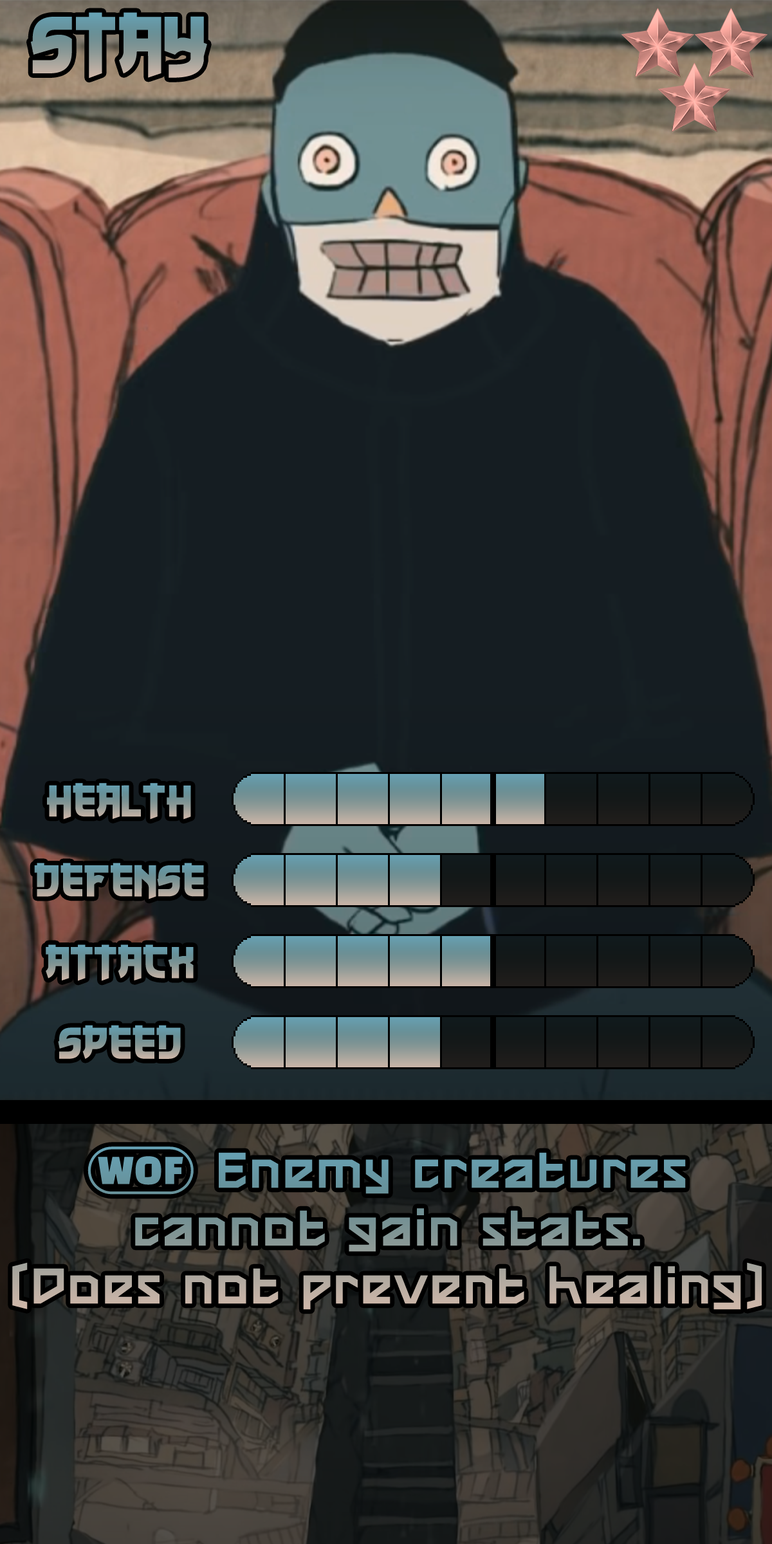
<style>
.page{position:relative;width:772px;height:1544px}
.page>*{position:absolute;margin:0}
.t1{font:152.5px "NukuNuku"}
.t2{font:83.6px "NukuNuku"}
.t3{font:85.6px/57.9px "TeroxiaDemoPersonalUse"}
.t4{font:85.6px/57.9px "stoogedings-Regular"}
</style>
<div class="page">
<p class="t1" style="left:30px;top:12px;width:177px;height:67px">Stay</p>
<p class="t2" style="left:47px;top:783px;width:144px;height:37px">Health</p>
<p class="t2" style="left:34px;top:863px;width:170px;height:37px">Defense</p>
<p class="t2" style="left:46px;top:945px;width:148px;height:36px">Attack</p>
<p class="t2" style="left:58px;top:1025px;width:123px;height:34px">Speed</p>
<p class="t3" style="left:12px;top:1147px;width:750px;height:163px;text-align:center"><span class="t4">(WOF)</span> Enemy creatures cannot gain stats.<br>(Does not prevent healing)</p>
</div>
